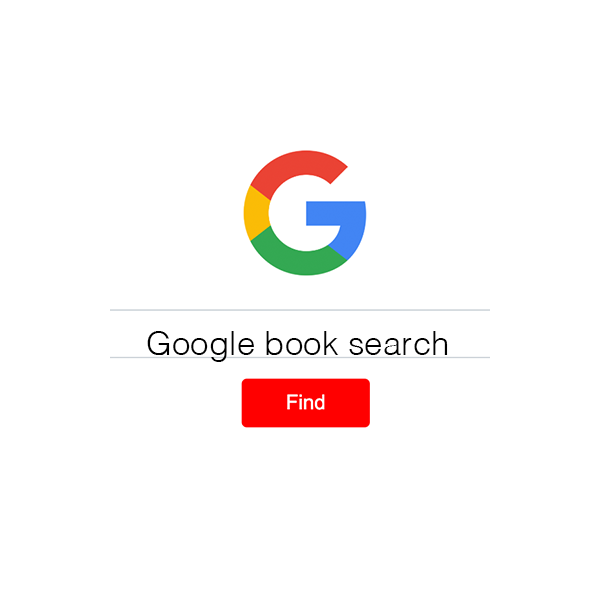
<style>
.page{position:relative;width:600px;height:600px;background:#ffffff}
.page>*{position:absolute;margin:0}
.t1{font:33.3px "Helvetica-Light";color:#000000}
</style>
<div class="page">
<p class="t1" style="left:147px;top:331px;width:301px;height:31px">Google book search</p>
</div>
